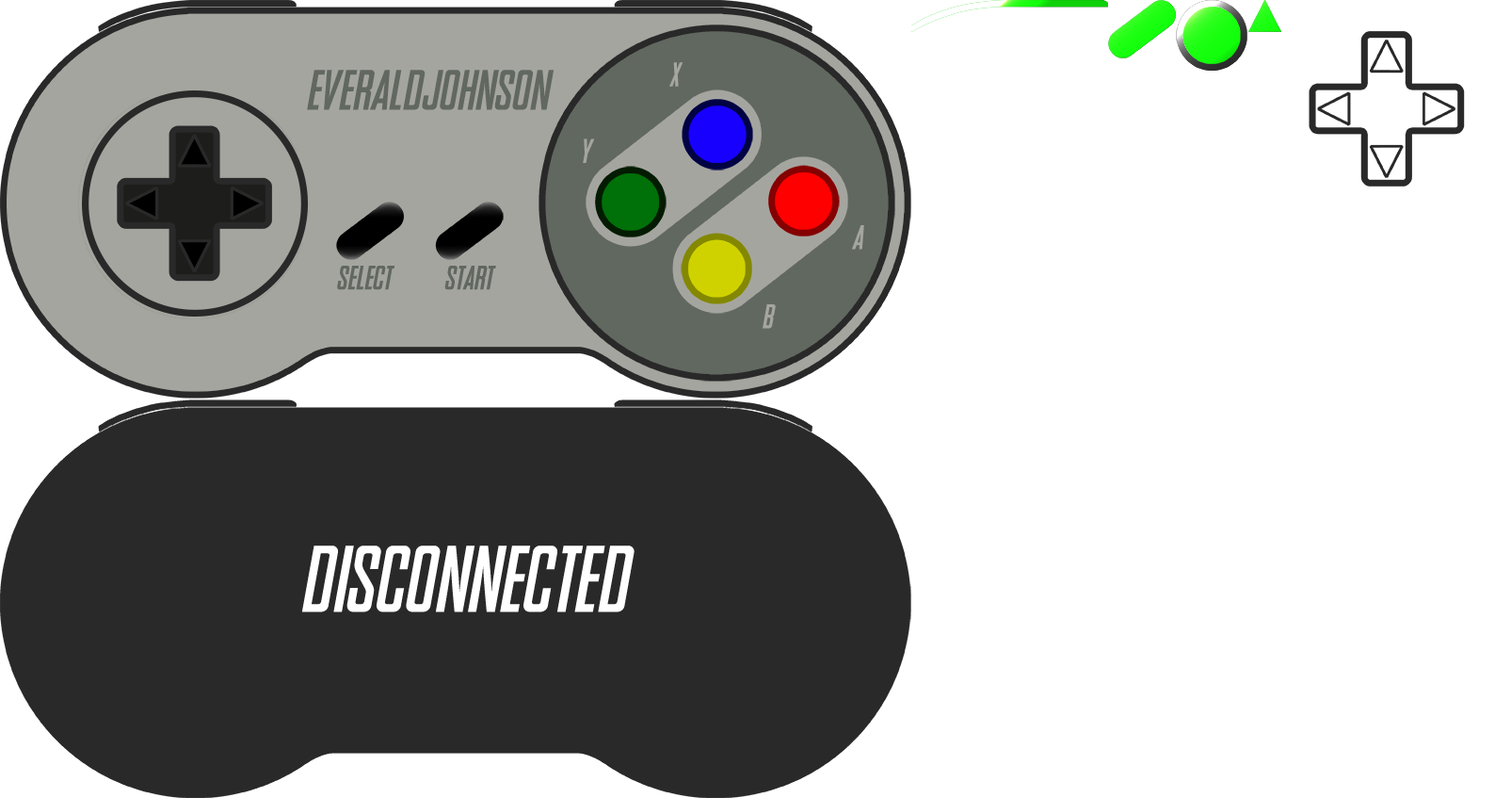
<style>
.page{position:relative;width:1495px;height:798px;background:#ffffff}
.page>*{position:absolute;margin:0}
.t1{font:33.9px "SNES-Italic";color:#a5a5a0}
.t2{font:56.5px "SNES-Italic";color:#616860}
.t3{font:33.9px "SNES-Italic";color:#616860}
.t4{font:94.2px "SNES-Italic";color:#ffffff}
</style>
<div class="page">
<p class="t1" style="left:669px;top:62px;width:15px;height:25px">x</p>
<p class="t2" style="left:307px;top:70px;width:248px;height:40px">EveraldJohnson</p>
<p class="t1" style="left:583px;top:138px;width:12px;height:25px">y</p>
<p class="t1" style="left:852px;top:225px;width:12px;height:25px">a</p>
<p class="t3" style="left:337px;top:266px;width:58px;height:24px">select</p>
<p class="t3" style="left:444px;top:266px;width:52px;height:24px">start</p>
<p class="t1" style="left:763px;top:304px;width:13px;height:25px">b</p>
<p class="t4" style="left:302px;top:545px;width:333px;height:67px">Disconnected</p>
</div>
